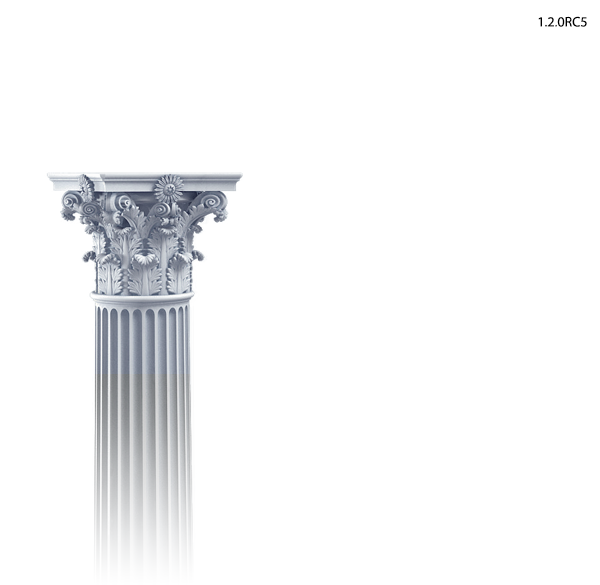
<style>
.page{position:relative;width:600px;height:585px;background:#ffffff}
.page>*{position:absolute;margin:0}
.t1{font:14px "MyriadPro-Regular";color:#000000}
</style>
<div class="page">
<p class="t1" style="left:538px;top:16px;width:49px;height:11px">1.2.0RC5</p>
</div>
